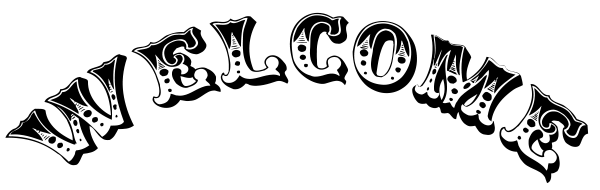
<style>
.page{position:relative;width:600px;height:190px;background:#ffffff}
.page>*{position:absolute;margin:0}
.t1{font:88px "Circus";color:#000000}
</style>
<div class="page">
<p class="t1" style="left:5px;top:12px;width:584px;height:172px">WELCOME</p>
</div>
